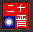
<style>
.page{position:relative;width:33px;height:32px;background:#f20000}
.page>*{position:absolute;margin:0}
.t1{font:10.4px "SimSun";color:#ffffff}
.t2{font:11.7px "SimSun";color:#ffffff}
</style>
<div class="page">
<p class="t1" style="left:7px;top:4px;width:18px;height:8px">二十</p>
<p class="t2" style="left:16px;top:15px;width:11px;height:12px">晋</p>
</div>
